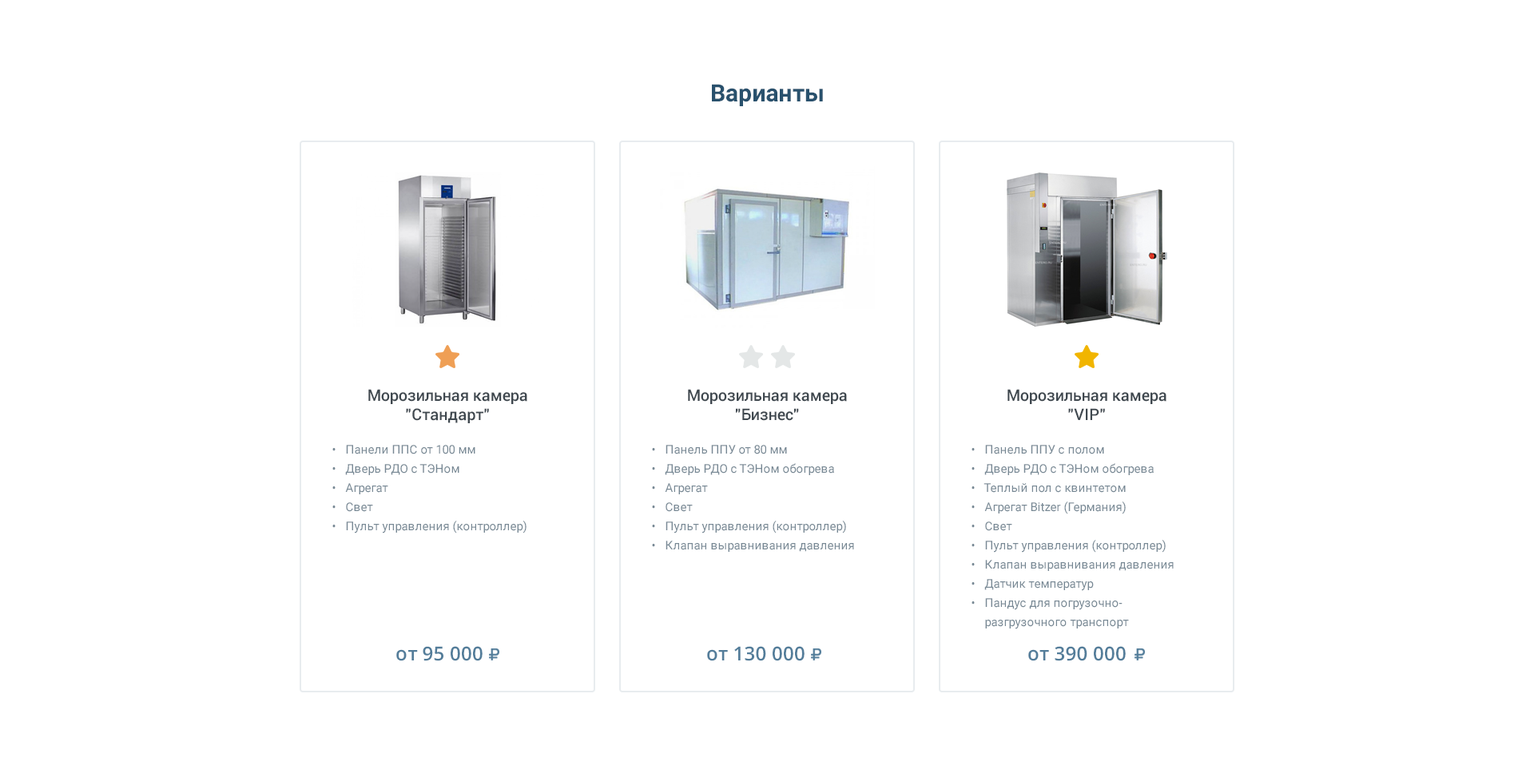
<style>
.page{position:relative;width:1534px;height:777px;background:#ffffff}
.page>*{position:absolute;margin:0}
.t1{font:24px "Roboto-Bold";letter-spacing:0.005em;color:#29516d}
.t2{font:16px/19.2px "Roboto-Medium";color:#3f484f}
.t3{font:12px/19.2px "Roboto-Regular";color:#788995}
.t4{font:12px/19.2px "Roboto-Regular";color:#ffffff}
.t5{font:19.2px "OpenSans-SemiBold";letter-spacing:0.005em;color:#537d9a}
</style>
<div class="page">
<p class="t1" style="left:712px;top:84px;width:111px;height:22px">Варианты</p>
<p class="t2" style="left:368px;top:389px;width:159px;height:34px;text-align:center">Морозильная камера<br>"Стандарт"</p>
<p class="t2" style="left:688px;top:389px;width:159px;height:32px;text-align:center">Морозильная камера<br>"Бизнес"</p>
<p class="t2" style="left:1007px;top:389px;width:159px;height:31px;text-align:center">Морозильная камера<br>"VIP"</p>
<p class="t3" style="left:332px;top:445px;width:194px;height:89px">•   Панели ППС от 100 мм<br>•   Дверь РДО с ТЭНом<br>•   Агрегат<br>•   Свет<br>•   Пульт управления (контроллер)</p>
<p class="t3" style="left:652px;top:445px;width:202px;height:107px">•   Панель ППУ от 80 мм<br>•   Дверь РДО с ТЭНом обогрева<br>•   Агрегат<br>•   Свет<br>•   Пульт управления (контроллер)<br>•   Клапан выравнивания давления</p>
<p class="t3" style="left:972px;top:445px;width:202px;height:185px">•   Панель ППУ с полом<br>•   Дверь РДО с ТЭНом обогрева<br>•   Теплый пол с квинтетом<br>•   Агрегат Bitzer (Германия)<br>•   Свет<br>•   Пульт управления (контроллер)<br>•   Клапан выравнивания давления<br>•   Датчик температур<br>•   Пандус для погрузочно-<br><span class="t4">•   </span>разгрузочного транспорт</p>
<p class="t5" style="left:396px;top:646px;width:87px;height:16px">от 95 000</p>
<p class="t5" style="left:707px;top:646px;width:98px;height:16px">от 130 000</p>
<p class="t5" style="left:1028px;top:646px;width:98px;height:16px">от 390 000</p>
</div>
